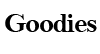
<style>
.page{position:relative;width:100px;height:54px;background:#ffffff}
.page>*{position:absolute;margin:0}
.t1{font:28px "BellMTBold";letter-spacing:-0.05em;color:#000000}
</style>
<div class="page">
<p class="t1" style="left:5px;top:14px;width:92px;height:18px">Goodies</p>
</div>
